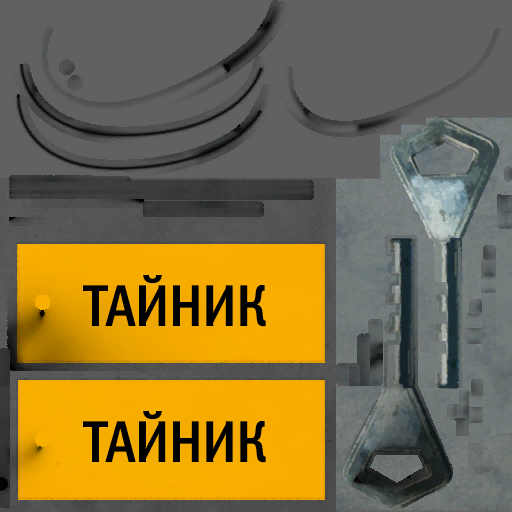
<style>
.page{position:relative;width:512px;height:512px;background:#606160}
.page>*{position:absolute;margin:0}
.t1{font:59px "FranklinGothicMediCondSCC";color:#000000}
</style>
<div class="page">
<p class="t1" style="left:83px;top:275px;width:183px;height:52px">ТАЙНИК</p>
<p class="t1" style="left:83px;top:411px;width:183px;height:52px">ТАЙНИК</p>
</div>
